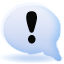
<style>
.page{position:relative;width:64px;height:64px}
.page>*{position:absolute;margin:0}
.t1{font:41.3px "GoudyStout";color:#080808;scale:0.87 1}
</style>
<div class="page">
<p class="t1" style="left:26px;top:11px;width:11px;height:33px">!</p>
</div>
